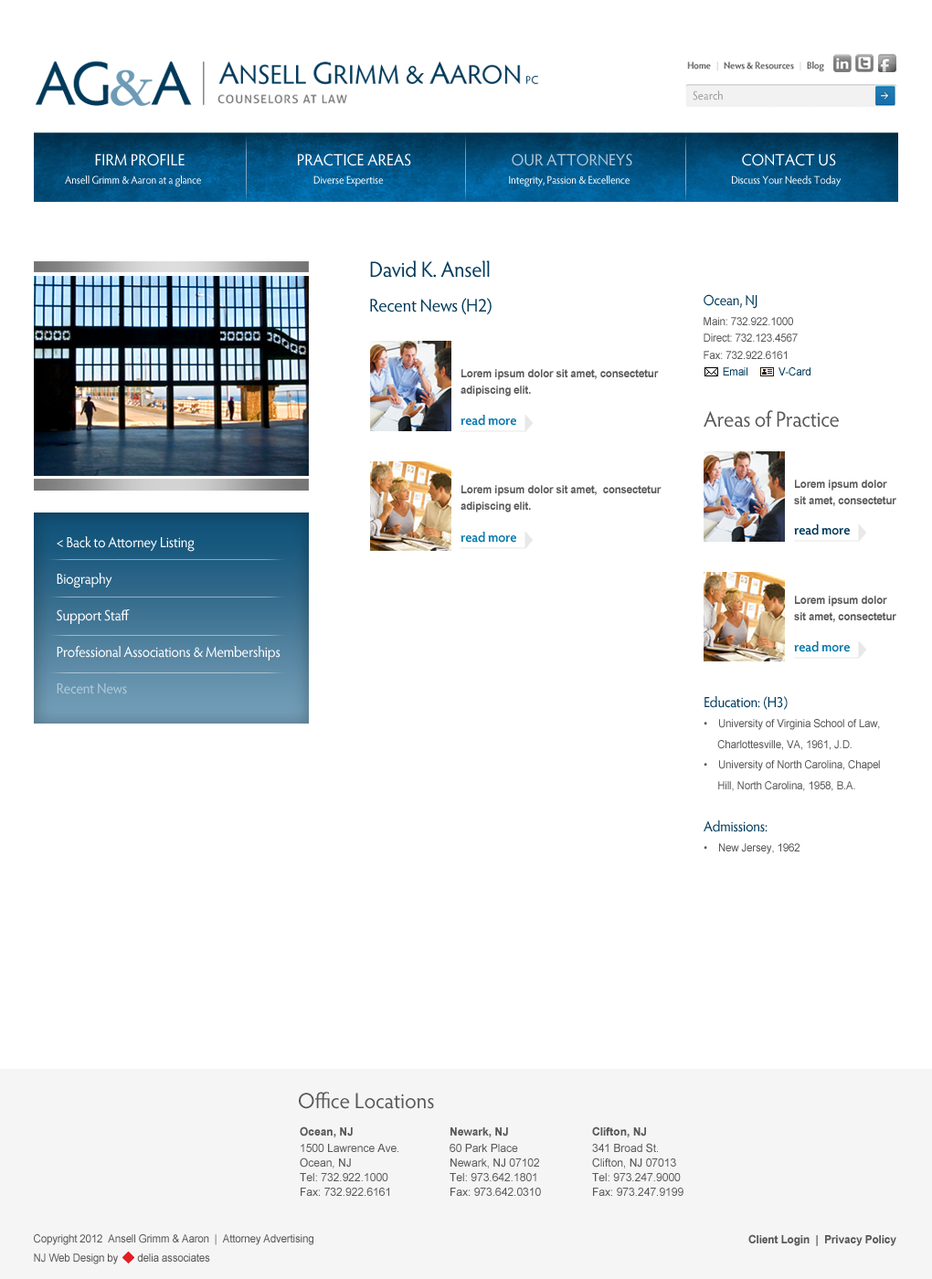
<style>
.page{position:relative;width:932px;height:1279px;background:#ffffff}
.page>*{position:absolute;margin:0}
.t1{font:11.9px "HypatiaSansPro-Regular";color:#969697;scale:0.96 1}
.t2{font:16.4px "HypatiaSansPro-Regular";color:#ffffff;scale:0.96 1}
.t3{font:16.4px "HypatiaSansPro-Regular";color:#b0cada;scale:0.96 1}
.t4{font:11px "HypatiaSansPro-Regular";letter-spacing:-0.01em;color:#ffffff;scale:0.95 1}
.t5{font:18.3px "HypatiaSansPro-Regular";letter-spacing:-0.015em;color:#00395a;scale:0.96 1}
.t6{font:21.9px "HypatiaSansPro-Regular";letter-spacing:-0.015em;color:#00395a;scale:0.96 1}
.t7{font:11px "ArialMT";letter-spacing:-0.015em;color:#58585a;scale:0.96 1}
.t8{font:14.6px "HypatiaSansPro-Regular";letter-spacing:-0.015em;color:#00395a;scale:0.96 1}
.t9{font:11px/16.4px "ArialMT";letter-spacing:-0.015em;color:#58585a;scale:0.96 1}
.t10{font:11px "ArialMT";letter-spacing:-0.015em;color:#00395a;scale:0.96 1}
.t11{font:11px "Arial-BoldMT";letter-spacing:-0.015em;color:#58585a;scale:0.96 1}
.t12{font:21.9px "HypatiaSansPro-Regular";letter-spacing:-0.015em;color:#58585a;scale:0.96 1}
.t13{font:13.7px "HypatiaSansPro-Semibold";letter-spacing:-0.015em;color:#0678ab;scale:0.96 1}
.t14{font:13.7px "HypatiaSansPro-Semibold";letter-spacing:-0.015em;color:#00395a;scale:0.96 1}
.t15{font:14.6px/32.9px "HypatiaSansPro-Regular";letter-spacing:-0.015em;color:#ffffff;scale:0.96 1}
.t16{font:14.6px/32.9px "HypatiaSansPro-Regular";letter-spacing:-0.015em;color:#b0cada;scale:0.96 1}
.t17{font:11px/16.9px "ArialMT";letter-spacing:-0.015em;color:#58585a;scale:0.96 1}
.t18{font:21.9px "HypatiaSansPro-Regular";letter-spacing:-0.005em;color:#58585a;scale:0.97 1}
.t19{font:11.4px/11px "ArialMT";color:#58585a;scale:0.96 1}
.t20{font:11.4px/11px "Arial-BoldMT";color:#58585a;scale:0.96 1}
.t21{font:11.4px/12.8px "ArialMT";color:#58585a;scale:0.96 1}
.t22{font:11px/15.5px "ArialMT";letter-spacing:-0.015em;color:#58585a;scale:0.96 1}
.t23{font:11.4px "Arial-BoldMT";letter-spacing:-0.015em;color:#58585a;scale:0.96 1}
</style>
<div class="page">
<p class="t1" style="left:693px;top:90px;width:30px;height:11px">Search</p>
<p class="t2" style="left:95px;top:154px;width:741px;height:12px">FIRM PROFILE              PRACTICE AREAS                  <span class="t3">OUR ATTORNEYS</span>                  CONTACT US</p>
<p class="t4" style="left:65px;top:175px;width:777px;height:12px">Ansell Grimm &amp; Aaron at a glance                                                    Diverse Expertise                                                          Integrity, Passion &amp; Excellence                                               Discuss Your Needs Today</p>
<p class="t5" style="left:370px;top:260px;width:122px;height:55px"><span class="t6">David K. Ansell<br><br></span>Recent News (H2)</p>
<p class="t7" style="left:704px;top:294px;width:107px;height:82px"><span class="t8">Ocean, NJ<br></span><span class="t9">Main: 732.92</span>2.1000<br>Direct: 732.123.4567<br>Fax: 732.922.6161<br><span class="t10">       Email           V-Card</span></p>
<p class="t11" style="left:461px;top:369px;width:198px;height:28px">Lorem ipsum dolor sit amet, consectetur<br>adipiscing elit.</p>
<p class="t12" style="left:704px;top:410px;width:135px;height:18px">Areas of Practice</p>
<p class="t13" style="left:461px;top:415px;width:55px;height:11px">read more</p>
<p class="t11" style="left:461px;top:485px;width:201px;height:28px">Lorem ipsum dolor sit amet,  consectetur<br>adipiscing elit.</p>
<p class="t11" style="left:794px;top:480px;width:102px;height:26px">Lorem ipsum dolor<br>sit amet, consectetur</p>
<p class="t13" style="left:461px;top:532px;width:55px;height:11px">read more</p>
<p class="t14" style="left:794px;top:525px;width:56px;height:10px">read more</p>
<p class="t15" style="left:57px;top:536px;width:224px;height:158px">&lt; Back to Attorney Listing<br>Biography<br>Support Staff<br>Professional Associations &amp; Memberships<br><span class="t16">Recent News</span></p>
<p class="t11" style="left:794px;top:596px;width:102px;height:26px">Lorem ipsum dolor<br>sit amet, consectetur</p>
<p class="t13" style="left:794px;top:641px;width:56px;height:11px">read more</p>
<p class="t17" style="left:704px;top:696px;width:176px;height:158px"><span class="t8">Education: (H3)<br></span>•    University of Virginia School of Law,<br>     Charlottesville, VA, 1961, J.D.<br>•    University of North Carolina, Chapel<br>     Hill, North Carolina, 1958, B.A.<br><br><span class="t8">Admissions:</span><br>•    New Jersey, 1962</p>
<p class="t18" style="left:299px;top:1092px;width:135px;height:17px">Office Locations</p>
<p class="t19" style="left:300px;top:1127px;width:98px;height:69px"><span class="t20">Ocean, NJ<br></span><span class="t21">1500 Lawrence Ave</span>.<br>Ocean, NJ<br>Tel: 732.922.1000<br>Fax: 732.922.6161</p>
<p class="t19" style="left:450px;top:1128px;width:91px;height:68px"><span class="t20">Newark, NJ<br></span><span class="t21">60 Park Place<br></span>Newark, NJ 07102<br>Tel: 973.642.1801<br>Fax: 973.642.0310</p>
<p class="t19" style="left:592px;top:1127px;width:92px;height:69px"><span class="t20">Clifton, NJ<br></span><span class="t21">341 Broad St.<br></span>Clifton, NJ 07013<br>Tel: 973.247.9000<br>Fax: 973.247.9199</p>
<p class="t7" style="left:34px;top:1235px;width:279px;height:30px">Copyright 2012  Ansell Grimm &amp; Aaron  |  Attorney Advertising<br><span class="t22">NJ Web Design by       delia associates</span></p>
<p class="t23" style="left:748px;top:1235px;width:148px;height:11px">Client Login  |  Privacy Policy</p>
</div>
